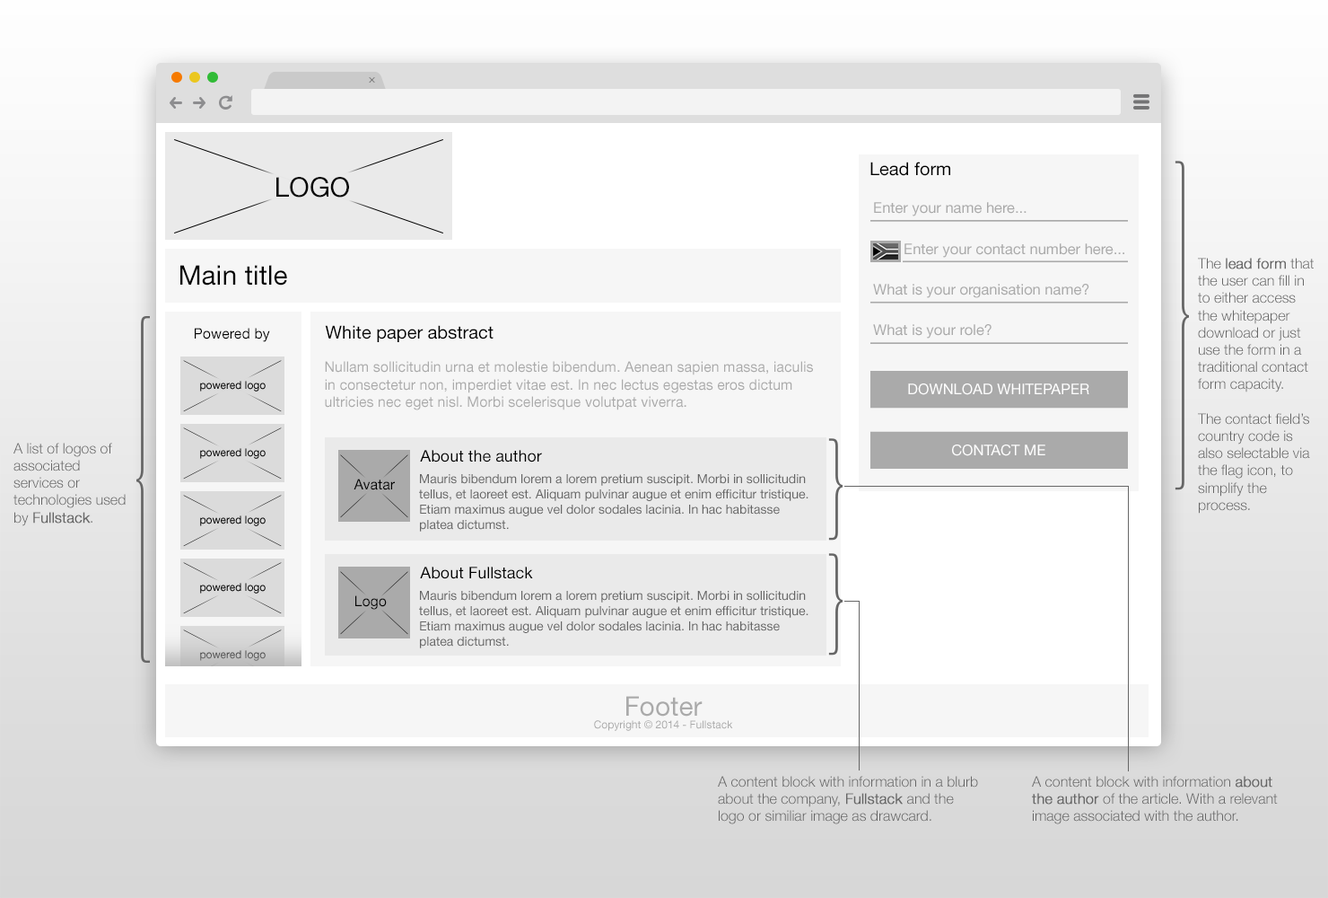
<style>
.page{position:relative;width:1328px;height:898px}
.page>*{position:absolute;margin:0}
.t1{font:20.8px "MavenProLight200-Regular"}
.t2{font:18px "HelveticaNeueLTStd-Roman";color:#000000}
.t3{font:26.9px "HelveticaNeueLTStd-Roman";color:#000000}
.t4{font:14.8px "HelveticaNeueLTStd-Roman";color:#aaaaaa}
.t5{font:14.4px "HelveticaNeueLTStd-Lt";color:#666666}
.t6{font:14.4px "HelveticaNeueLTStd-Lt";color:#666666;font-weight:bold}
.t7{font:14.4px "HelveticaNeueLTStd-Roman";color:#000000}
.t8{font:14.4px "HelveticaNeueLTStd-Roman";color:#aaaaaa}
.t9{font:14.8px "HelveticaNeueLTStd-Roman";color:#ffffff}
.t10{font:16.2px "HelveticaNeueLTStd-Roman";color:#000000}
.t11{font:12.6px "HelveticaNeueLTStd-Roman";color:#666666}
.t12{font:10.8px "HelveticaNeueLTStd-Roman";color:#aaaaaa}
.t13{font:26.9px "HelveticaNeueLTStd-Roman";color:#aaaaaa}
</style>
<div class="page">
<p class="t1" style="left:369px;top:77px;width:6px;height:6px;rotate:-45deg">+</p>
<p class="t2" style="left:871px;top:162px;width:80px;height:14px">Lead form</p>
<p class="t3" style="left:276px;top:177px;width:73px;height:20px">LOGO</p>
<p class="t4" style="left:874px;top:202px;width:153px;height:14px">Enter your name here...</p>
<p class="t4" style="left:905px;top:243px;width:220px;height:15px">Enter your contact number here...</p>
<p class="t5" style="left:1198px;top:258px;width:116px;height:255px">The <span class="t6">lead form</span> that the user can fill in to either access the whitepaper download or just use the form in a traditional contact form capacity.<br><br>The contact field’s country code is also selectable via the flag icon, to simplify the process.</p>
<p class="t3" style="left:180px;top:265px;width:107px;height:20px">Main title</p>
<p class="t4" style="left:873px;top:284px;width:217px;height:14px">What is your organisation name?</p>
<p class="t7" style="left:195px;top:328px;width:75px;height:14px">Powered by</p>
<p class="t2" style="left:325px;top:325px;width:169px;height:17px">White paper abstract</p>
<p class="t4" style="left:873px;top:324px;width:119px;height:14px">What is your role?</p>
<p class="t8" style="left:325px;top:361px;width:488px;height:49px">Nullam sollicitudin urna et molestie bibendum. Aenean sapien massa, iaculis in consectetur non, imperdiet vitae est. In nec lectus egestas eros dictum ultricies nec eget nisl. Morbi scelerisque volutpat viverra.</p>
<p class="t9" style="left:908px;top:383px;width:182px;height:12px">DOWNLOAD WHITEPAPER</p>
<p class="t5" style="left:13px;top:443px;width:113px;height:83px">A list of logos of associated services or technologies used by <span class="t6">Fullstack</span>.</p>
<p class="t10" style="left:420px;top:450px;width:122px;height:12px">About the author</p>
<p class="t9" style="left:952px;top:444px;width:94px;height:12px">CONTACT ME</p>
<p class="t11" style="left:419px;top:474px;width:390px;height:57px">Mauris bibendum lorem a lorem pretium suscipit. Morbi in sollicitudin tellus, et laoreet est. Aliquam pulvinar augue et enim efficitur tristique. Etiam maximus augue vel dolor sodales lacinia. In hac habitasse platea dictumst.</p>
<p class="t7" style="left:354px;top:478px;width:41px;height:12px">Avatar</p>
<p class="t10" style="left:420px;top:566px;width:113px;height:13px">About Fullstack</p>
<p class="t11" style="left:419px;top:591px;width:390px;height:57px">Mauris bibendum lorem a lorem pretium suscipit. Morbi in sollicitudin tellus, et laoreet est. Aliquam pulvinar augue et enim efficitur tristique. Etiam maximus augue vel dolor sodales lacinia. In hac habitasse platea dictumst.</p>
<p class="t7" style="left:355px;top:595px;width:32px;height:14px">Logo</p>
<p class="t12" style="left:594px;top:696px;width:139px;height:35px;text-align:center"><span class="t13">Footer<br></span>Copyright © 2014 - Fullstack</p>
<p class="t5" style="left:718px;top:776px;width:260px;height:48px">A content block with information in a blurb about the company, <span class="t6">Fullstack </span>and the logo or similiar image as drawcard.</p>
<p class="t5" style="left:1032px;top:776px;width:246px;height:48px">A content block with information <span class="t6">about the author</span> of the article. With a relevant image associated with the author.</p>
</div>
